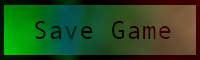
<style>
.page{position:relative;width:200px;height:60px}
.page>*{position:absolute;margin:0}
.t1{font:25.9px "AndaleMono";color:#000000}
</style>
<div class="page">
<p class="t1" style="left:35px;top:21px;width:136px;height:18px">Save Game</p>
<p class="t1" style="left:35px;top:24px;width:136px;height:18px;opacity:0.1">Save Game</p>
</div>
